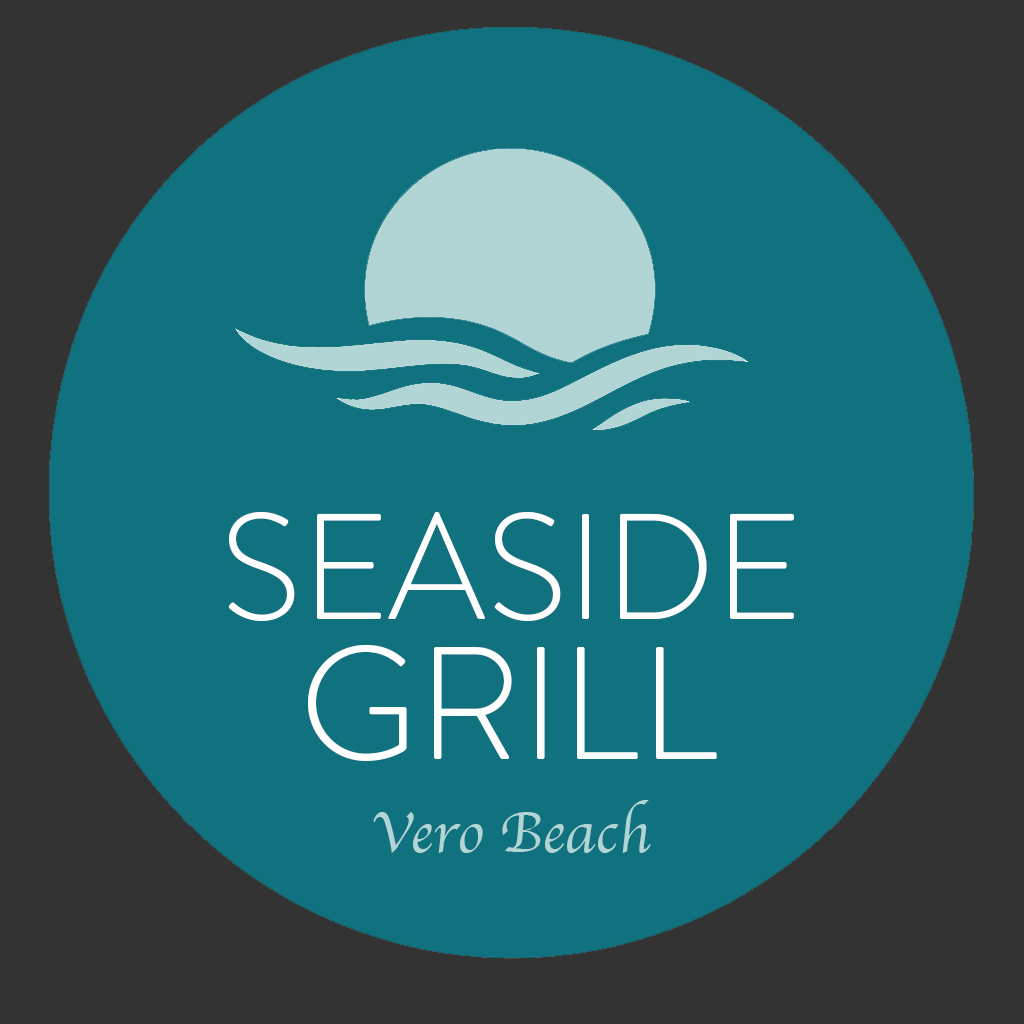
<style>
.page{position:relative;width:1024px;height:1024px;background:#10717f}
.page>*{position:absolute;margin:0}
.t1{font:150px "HvDTrial_BrandonText-Light";color:#ffffff}
.t2{font:160px "HvDTrial_BrandonText-Light";color:#ffffff}
.t3{font:60px "Apple-Chancery";color:#b1d5d5}
</style>
<div class="page">
<p class="t1" style="left:228px;top:511px;width:566px;height:110px">SEASIDE</p>
<p class="t2" style="left:308px;top:644px;width:409px;height:117px">GRILL</p>
<p class="t3" style="left:373px;top:800px;width:278px;height:53px">Vero Beach</p>
</div>
